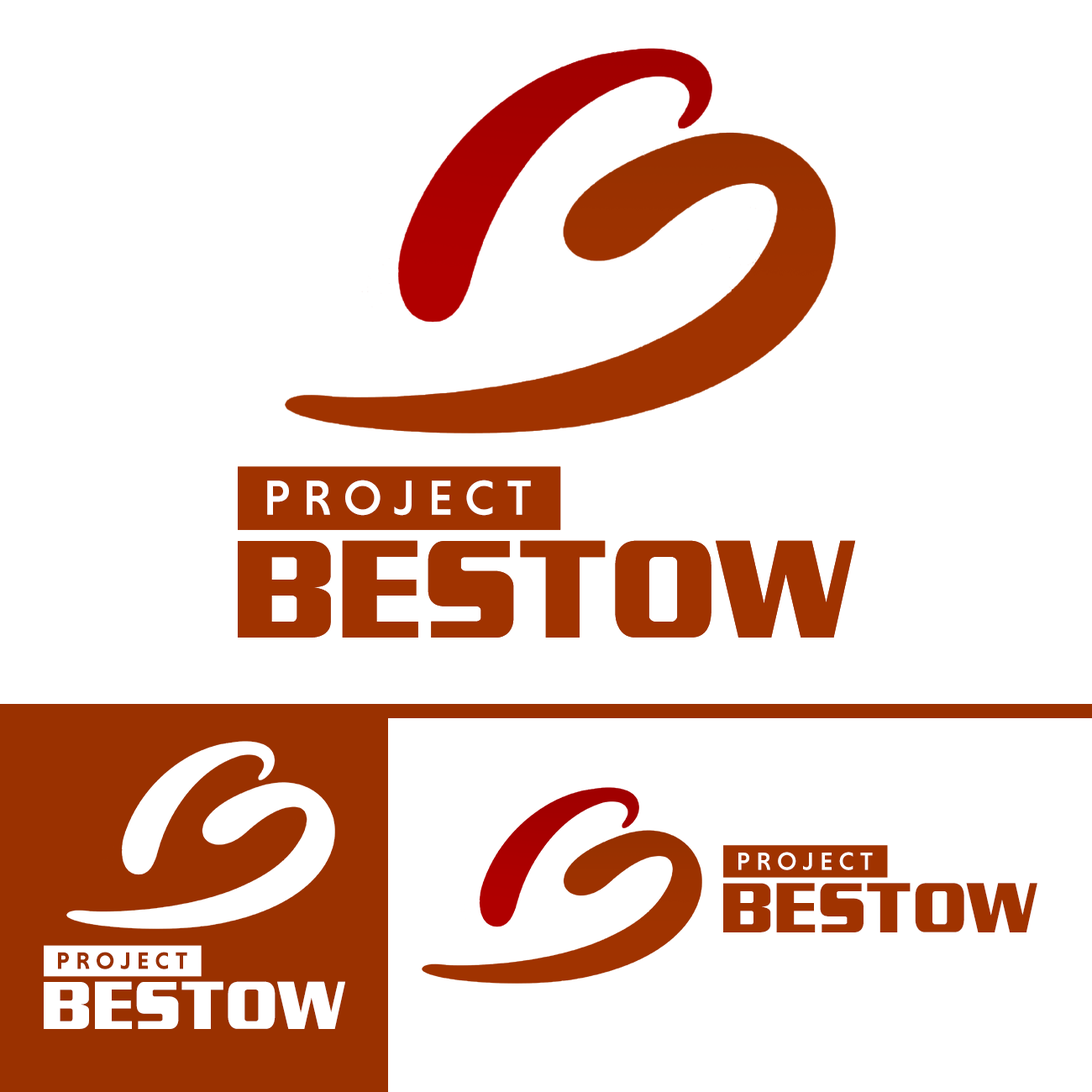
<style>
.page{position:relative;width:1092px;height:1092px;background:#ffffff}
.page>*{position:absolute;margin:0}
.t1{font:49.9px "NiveauGroteskMedium";letter-spacing:0.24em;color:#ffffff;text-transform:uppercase}
.t2{font:138px "EnterSansmanBold";color:#a03300;text-transform:uppercase}
.t3{font:25.5px "NiveauGroteskMedium";letter-spacing:0.24em;color:#ffffff;text-transform:uppercase}
.t4{font:70.4px "EnterSansmanBold";color:#a03300;text-transform:uppercase}
.t5{font:24.4px "NiveauGroteskBold";letter-spacing:0.24em;color:#9a3100;text-transform:uppercase}
.t6{font:67.4px "EnterSansmanBold";color:#ffffff;text-transform:uppercase}
</style>
<div class="page">
<p class="t1" style="left:267px;top:480px;width:264px;height:36px">Project</p>
<p class="t2" style="left:238px;top:540px;width:618px;height:98px">Bestow</p>
<p class="t3" style="left:738px;top:852px;width:135px;height:18px">Project</p>
<p class="t4" style="left:723px;top:883px;width:314px;height:49px">Bestow</p>
<p class="t5" style="left:58px;top:952px;width:129px;height:17px">Project</p>
<p class="t6" style="left:44px;top:981px;width:301px;height:48px">Bestow</p>
</div>
